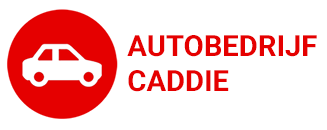
<style>
.page{position:relative;width:327px;height:130px;background:#ffffff}
.page>*{position:absolute;margin:0}
.t1{font:29.1px "Roboto-Bold";color:#e50000}
</style>
<div class="page">
<p class="t1" style="left:127px;top:35px;width:190px;height:57px">AUTOBEDRIJF<br>CADDIE</p>
</div>
